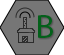
<style>
.page{position:relative;width:64px;height:55px;background:#767676}
.page>*{position:absolute;margin:0}
.t1{font:33.3px "MyriadPro-Regular";color:#006017}
</style>
<div class="page">
<p class="t1" style="left:38px;top:15px;width:15px;height:23px">B</p>
</div>
